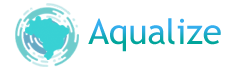
<style>
.page{position:relative;width:232px;height:70px;background:#ffffff}
.page>*{position:absolute;margin:0}
.t1{font:35px "TrebuchetMS"}
</style>
<div class="page">
<p class="t1" style="left:88px;top:18px;width:133px;height:34px">Aqualize</p>
</div>
